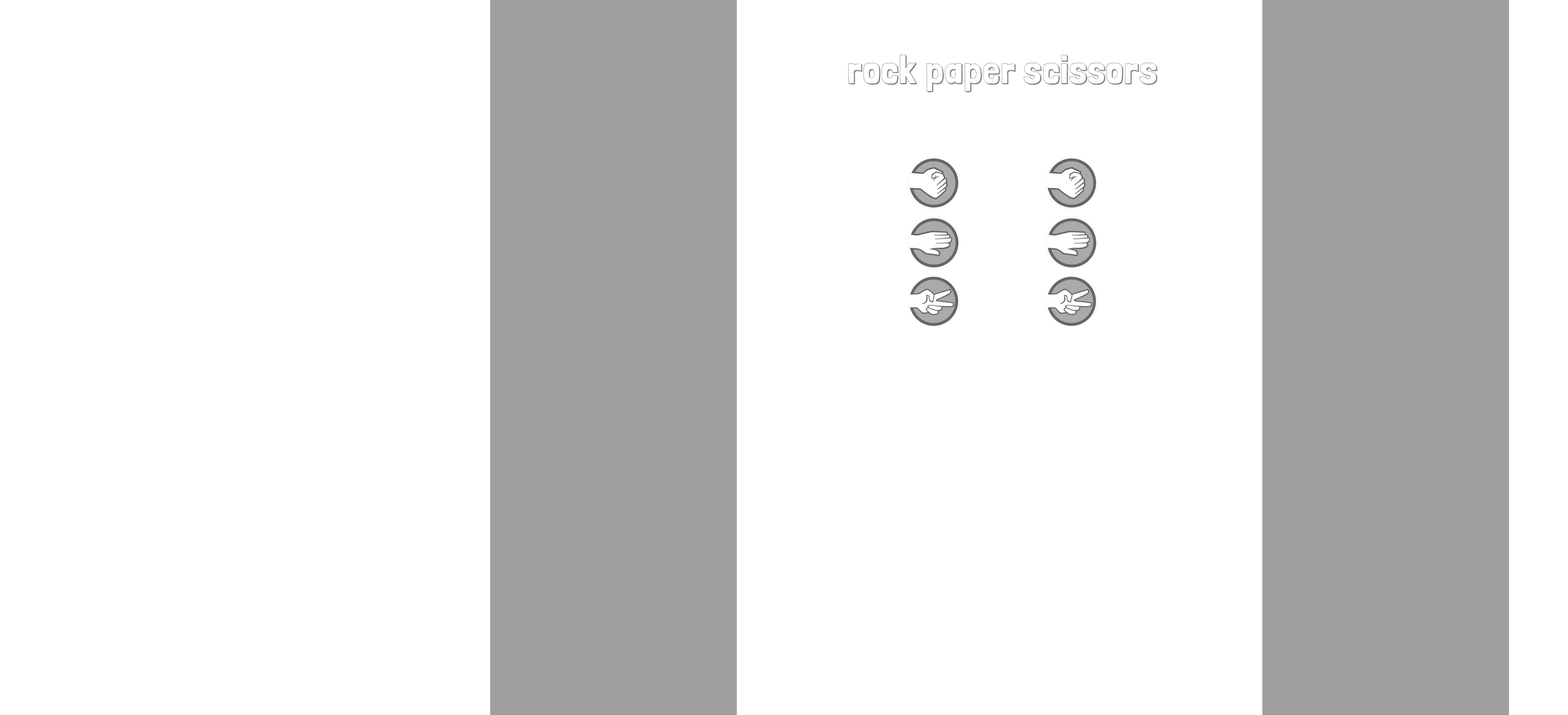
<style>
.page{position:relative;width:1568px;height:715px;background:#ffffff}
.page>*{position:absolute;margin:0}
.t1{font:38.6px "LondrinaShadow-Regular";letter-spacing:0.025em;color:#808080}
</style>
<div class="page">
<p class="t1" style="left:848px;top:54px;width:310px;height:39px">rock paper scissors</p>
</div>
